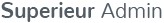
<style>
.page{position:relative;width:164px;height:23px;background:#ffffff}
.page>*{position:absolute;margin:0}
.t1{font:21px "Nunito-Bold";color:#525c65}
.t2{font:21px "Nunito-Light";color:#525c65}
</style>
<div class="page">
<p class="t1" style="left:1px;top:2px;width:161px;height:20px">Superieur <span class="t2">Admin</span></p>
</div>
